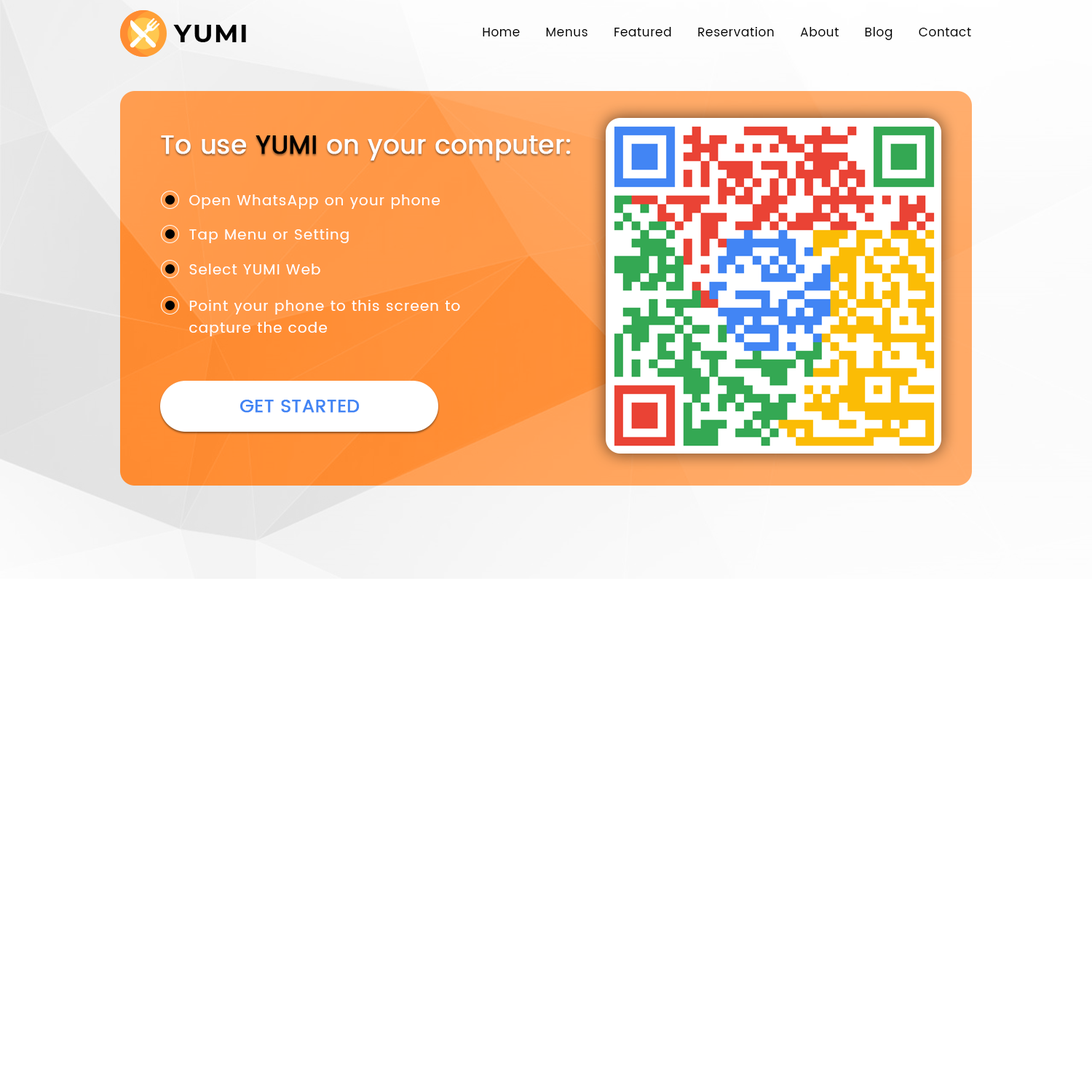
<style>
.page{position:relative;width:1092px;height:1092px;background:#ffffff}
.page>*{position:absolute;margin:0}
.t1{font:12.4px "Poppins-Regular";letter-spacing:0.04em;color:#000000}
.t2{font:25.5px "Poppins-Regular";color:#ffffff;font-weight:bold}
.t3{font:25.5px "Poppins-Regular";color:#000000;font-weight:bold}
.t4{font:14.6px "Poppins-Regular";letter-spacing:0.06em;color:#ffffff}
.t5{font:14.6px/21.8px "Poppins-Regular";letter-spacing:0.06em;color:#ffffff}
.t6{font:18.2px "Poppins-Regular";color:#4285f4;text-transform:uppercase;font-weight:bold}
</style>
<div class="page">
<p class="t1" style="left:483px;top:27px;width:488px;height:13px">Home      Menus      Featured      Reservation      About      Blog      Contact</p>
<p class="t2" style="left:161px;top:135px;width:410px;height:26px">To use <span class="t3">YUMI</span> on your computer:</p>
<p class="t4" style="left:189px;top:194px;width:251px;height:15px">Open WhatsApp on your phone</p>
<p class="t4" style="left:189px;top:229px;width:160px;height:14px">Tap Menu or Setting</p>
<p class="t4" style="left:189px;top:264px;width:131px;height:10px">Select YUMI Web</p>
<p class="t5" style="left:189px;top:300px;width:271px;height:36px;text-align:right">Point your phone to this screen to <br>capture the code</p>
<p class="t6" style="left:240px;top:400px;width:120px;height:13px">Get Started</p>
</div>
